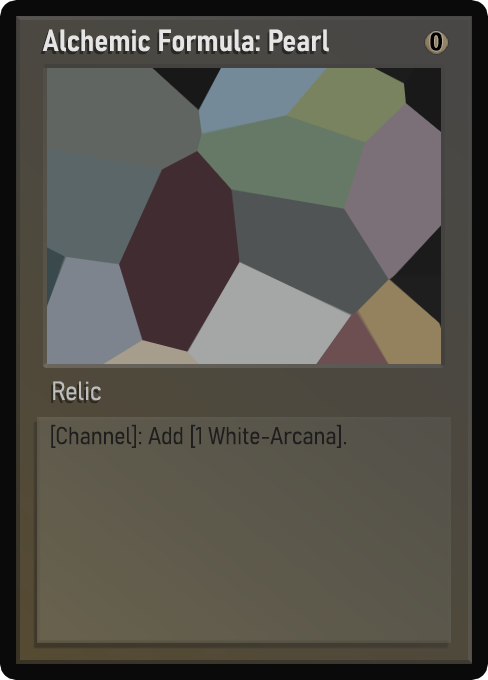
<style>
.page{position:relative;width:488px;height:680px}
.page>*{position:absolute;margin:0}
.t1{font:30px "Bahnschrift-SemiBoldSemiCondensed";color:#f2f2f2;font-weight:bold}
.t2{font:25px "WTRRoycroft";color:#000000;font-weight:bold;scale:1.09 1}
.t3{font:26px "Bahnschrift-LightSemiCondensed";color:#c8c8c8;font-weight:bold}
.t4{font:24px "Bahnschrift-LightSemiCondensed";color:#1e1e1e;font-weight:bold}
</style>
<div class="page">
<p class="t1" style="left:42px;top:29px;width:287px;height:23px;opacity:0.9">Alchemic Formula: Pearl</p>
<p class="t2" style="left:430px;top:32px;width:12px;height:19px">0</p>
<p class="t3" style="left:53px;top:381px;width:48px;height:20px;opacity:0.9">Relic</p>
<p class="t4" style="left:51px;top:424px;width:295px;height:24px">[Channel]: Add [1 White-Arcana].</p>
</div>
